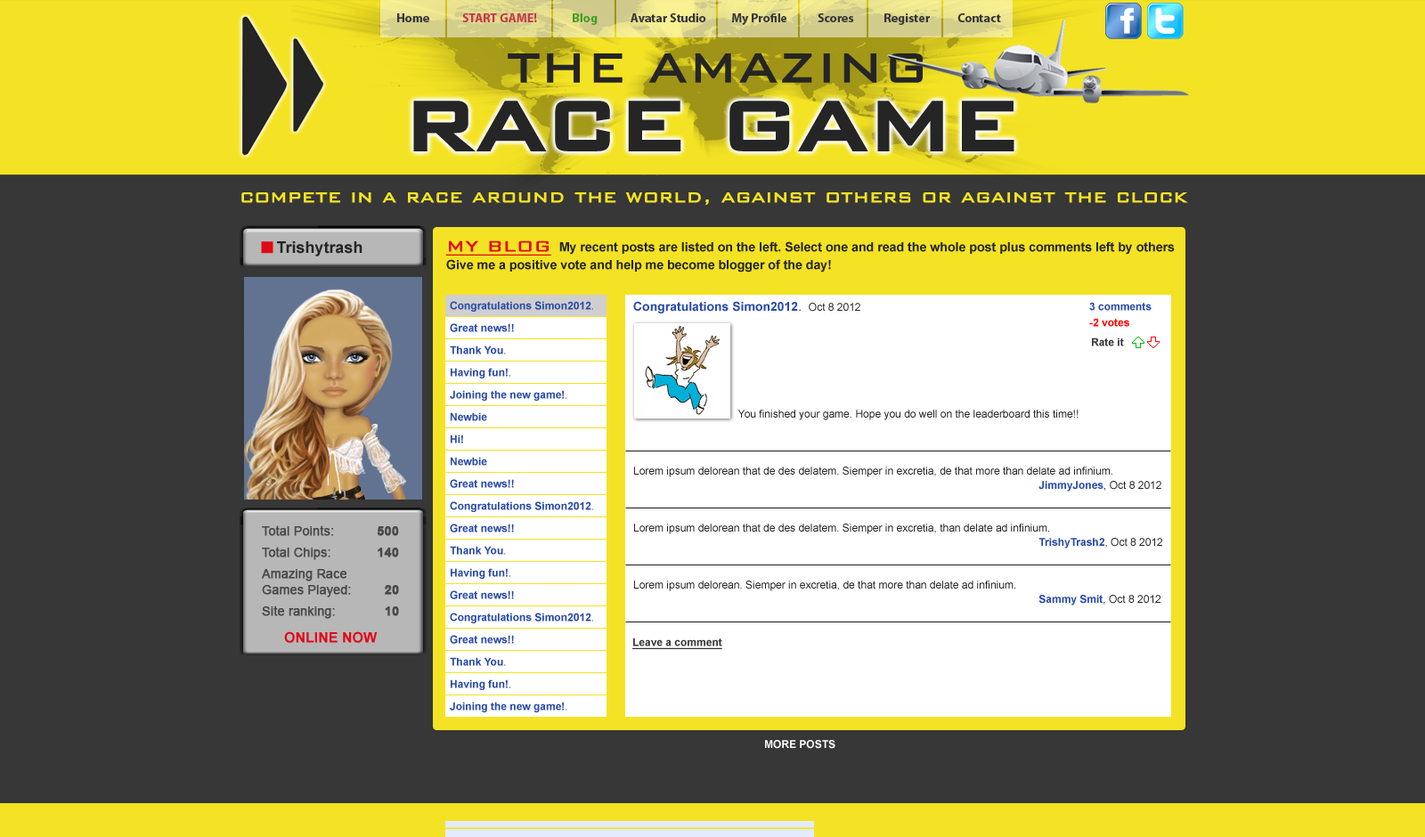
<style>
.page{position:relative;width:1425px;height:837px;background:#373737}
.page>*{position:absolute;margin:0}
.t1{font:12.5px "MyriadPro-Bold";color:#373737}
.t2{font:12.5px "MyriadPro-Bold";color:#c6384b}
.t3{font:12.5px "MyriadPro-Bold";color:#449e24}
.t4{font:53.7px "BankGothic-Light";color:#252525;font-weight:bold}
.t5{font:93.1px "BankGothic-Medium";letter-spacing:-0.05em;color:#252525;font-weight:bold}
.t6{font:22.4px "BankGothic-Light";color:#f4e324;font-weight:bold}
.t7{font:16px "Arial-BoldMT";color:#252525}
.t8{font:12.5px "ZapfDingbatsITCbyBT-Regular";color:#e10918}
.t9{font:12.6px/17.8px "Arial-BoldMT";color:#252525}
.t10{font:20.1px/21.4px "BankGothic-Light";color:#e10918;font-weight:bold;text-decoration:underline}
.t11{font:10.7px/22.3px "Arial-BoldMT";color:#2a4ba9}
.t12{font:10.7px/22.3px "ArialMT";color:#252525}
.t13{font:10.7px/14.2px "ArialMT";color:#252525}
.t14{font:12.5px/22.3px "Arial-BoldMT";color:#2a4ba9}
.t15{font:12.5px/22.3px "ArialMT";color:#252525}
.t16{font:10.7px/26.7px "ArialMT";color:#252525}
.t17{font:10.7px/14.2px "Arial-BoldMT";color:#2a4ba9}
.t18{font:10.7px/16px "Arial-BoldMT";color:#2a4ba9}
.t19{font:10.7px/16px "Arial-BoldMT";color:#ff0000}
.t20{font:10.7px "Arial-BoldMT";color:#373737}
.t21{font:12.5px/21.4px "ArialMT";color:#494949;font-weight:bold}
.t22{font:12.5px/21.4px "Arial-BoldMT";color:#494949;font-weight:bold}
.t23{font:12.5px/16px "ArialMT";color:#494949;font-weight:bold}
.t24{font:12.5px/16px "Arial-BoldMT";color:#494949;font-weight:bold}
.t25{font:14.2px "Arial-BoldMT";color:#e10918}
.t26{font:10.7px "Arial-BoldMT";color:#373737;text-decoration:underline}
.t27{font:10.7px "Arial-BoldMT";color:#ffffff}
</style>
<div class="page">
<p class="t1" style="left:397px;top:13px;width:604px;height:12px">Home             <span class="t2">START GAME!              </span><span class="t3">Blog             </span>Avatar Studio          My Profile            Scores            Register           Contact</p>
<p class="t4" style="left:508px;top:53px;width:414px;height:30px">THE AMAZING</p>
<p class="t5" style="left:413px;top:101px;width:601px;height:50px">RACE GAME</p>
<p class="t6" style="left:241px;top:192px;width:947px;height:13px">compete in a race around the world, against others or against the clock</p>
<p class="t7" style="left:261px;top:241px;width:101px;height:15px"><span class="t8">n </span>Trishytrash</p>
<p class="t9" style="left:445px;top:240px;width:729px;height:32px"><span class="t10">MY BLOG </span>My recent posts are listed on the left. Select one and read the whole post plus comments left by others<br>Give me a positive vote and help me become blogger of the day!</p>
<p class="t11" style="left:450px;top:301px;width:143px;height:411px">Congratulations Simon2012<span class="t12">.<br></span>Great news!!<br>Thank You<span class="t12">. <br></span>Having fun!<span class="t12">. <br></span>Joining the new game!<span class="t12">.<br></span>Newbie <br>Hi!<br>Newbie<br>Great news!!<br>Congratulations Simon2012<span class="t12">.<br></span>Great news!!<br>Thank You<span class="t12">. <br></span>Having fun!<span class="t12">. <br></span>Great news!!<br>Congratulations Simon2012<span class="t12">.<br></span>Great news!!<br>Thank You<span class="t12">. <br></span>Having fun!<span class="t12">. <br></span>Joining the new game!<span class="t12">.</span></p>
<p class="t13" style="left:633px;top:301px;width:529px;height:304px"><span class="t14">Congratulations Simon2012</span><span class="t15">.  </span>Oct 8 2012<br><span class="t16">                        <br><br><br>      You finished your game. </span>Hope you do well on the leaderboard this time!!<br><br><br><br>Lorem ipsum delorean that de des delatem. Siemper in excretia, de that more than delate ad infinium.<br>                   <span class="t17">JimmyJones</span>, Oct 8 2012<br><br><br>Lorem ipsum delorean that de des delatem. Siemper in excretia, than delate ad infinium.<br>                   <span class="t17">TrishyTrash2</span>, Oct 8 2012<br><br><br>Lorem ipsum delorean. Siemper in excretia, de that more than delate ad infinium.<br>                   <span class="t17">Sammy Smit</span>, Oct 8 2012</p>
<p class="t18" style="left:1089px;top:302px;width:62px;height:25px">3 comments<br><span class="t19">-2 votes</span></p>
<p class="t20" style="left:1092px;top:337px;width:32px;height:9px">Rate it</p>
<p class="t21" style="left:262px;top:525px;width:137px;height:94px">Total Points:      <span class="t22">500<br></span>Total Chips:      <span class="t22">140<br></span>Amazing Race<br><span class="t23">Games Played:        </span><span class="t24">20<br></span>Site ranking:        <span class="t22">10</span></p>
<p class="t25" style="left:284px;top:631px;width:94px;height:12px">ONLINE NOW</p>
<p class="t26" style="left:632px;top:638px;width:90px;height:11px">Leave a comment</p>
<p class="t27" style="left:765px;top:740px;width:70px;height:9px">MORE POSTS</p>
</div>
